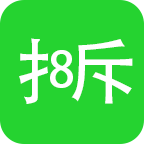
<style>
.page{position:relative;width:144px;height:144px;background:#25d330}
.page>*{position:absolute;margin:0}
.t1{font:72px "AdobeHeitiStd-Regular";color:#ffffff}
.t2{font:48px "AdobeHeitiStd-Regular";color:#ffffff}
</style>
<div class="page">
<p class="t1" style="left:19px;top:38px;width:30px;height:66px">扌</p>
<p class="t1" style="left:71px;top:39px;width:62px;height:65px">斥</p>
<p class="t2" style="left:50px;top:50px;width:23px;height:38px">8</p>
</div>
